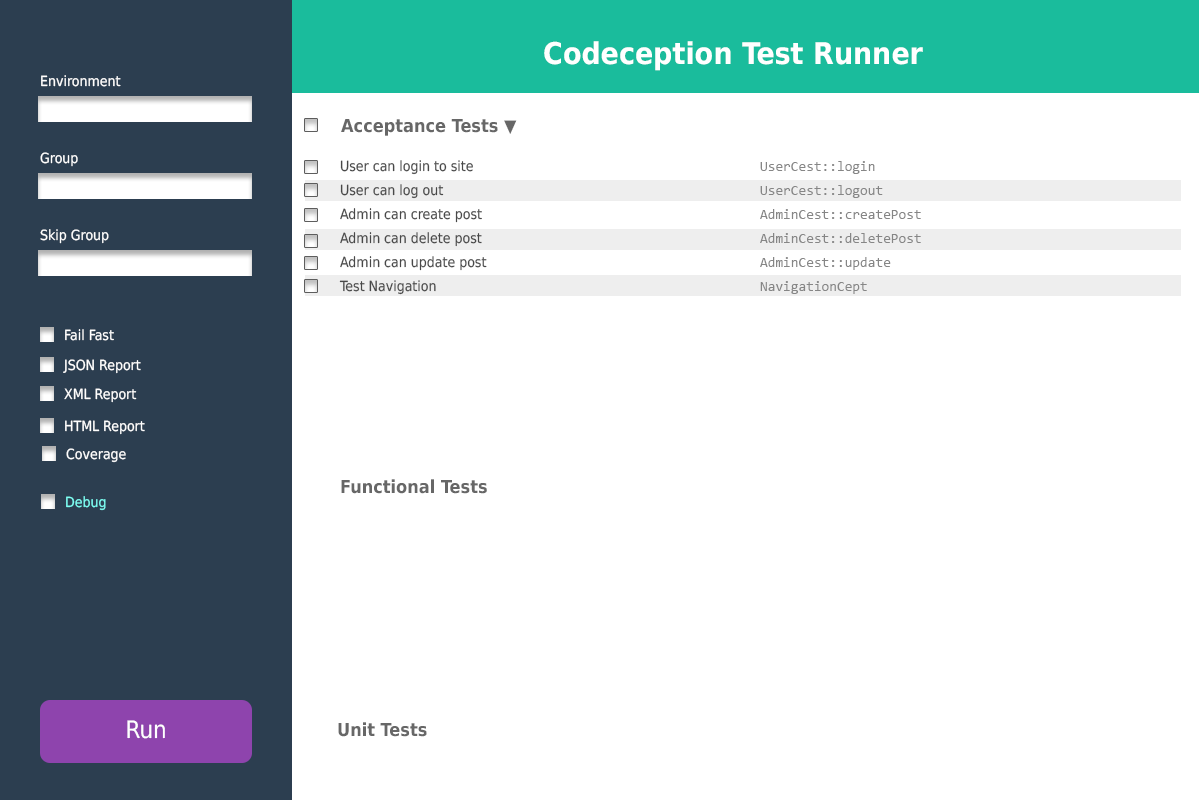
<style>
.page{position:relative;width:1200px;height:800px;background:#ffffff}
.page>*{position:absolute;margin:0}
.t1{font:30px "DejaVuSansCondensed-Bold";color:#ffffff}
.t2{font:14px "DejaVuSansCondensed";color:#ffffff}
.t3{font:18px "DejaVuSansCondensed-Bold";color:#676767}
.t4{font:14px/24px "DejaVuSansCondensed";color:#484848}
.t5{font:14px/24px "Consolas";color:#868686}
.t6{font:14px "DejaVuSansCondensed";color:#7efff4}
.t7{font:24px "DejaVuSansCondensed";color:#ffffff}
</style>
<div class="page">
<p class="t1" style="left:544px;top:41px;width:379px;height:30px">Codeception Test Runner</p>
<p class="t2" style="left:41px;top:75px;width:80px;height:12px">Environment</p>
<p class="t3" style="left:341px;top:119px;width:176px;height:17px">Acceptance Tests ▼</p>
<p class="t2" style="left:40px;top:152px;width:38px;height:15px">Group</p>
<p class="t4" style="left:339px;top:160px;width:148px;height:135px">User can login to site<br>User can log out<br>Admin can create post<br>Admin can delete post<br>Admin can update post<br>Test Navigation</p>
<p class="t5" style="left:760px;top:161px;width:161px;height:133px">UserCest::login<br>UserCest::logout<br>AdminCest::createPost<br>AdminCest::deletePost<br>AdminCest::update<br>NavigationCept</p>
<p class="t2" style="left:40px;top:229px;width:69px;height:15px">Skip Group</p>
<p class="t2" style="left:65px;top:329px;width:49px;height:12px">Fail Fast</p>
<p class="t2" style="left:63px;top:359px;width:78px;height:15px">JSON Report</p>
<p class="t2" style="left:64px;top:388px;width:73px;height:15px">XML Report</p>
<p class="t2" style="left:65px;top:420px;width:80px;height:15px">HTML Report</p>
<p class="t2" style="left:66px;top:448px;width:60px;height:15px">Coverage</p>
<p class="t3" style="left:341px;top:479px;width:146px;height:15px">Functional Tests</p>
<p class="t6" style="left:66px;top:496px;width:40px;height:15px">Debug</p>
<p class="t7" style="left:127px;top:720px;width:38px;height:19px">Run</p>
<p class="t3" style="left:338px;top:722px;width:89px;height:15px">Unit Tests</p>
</div>
